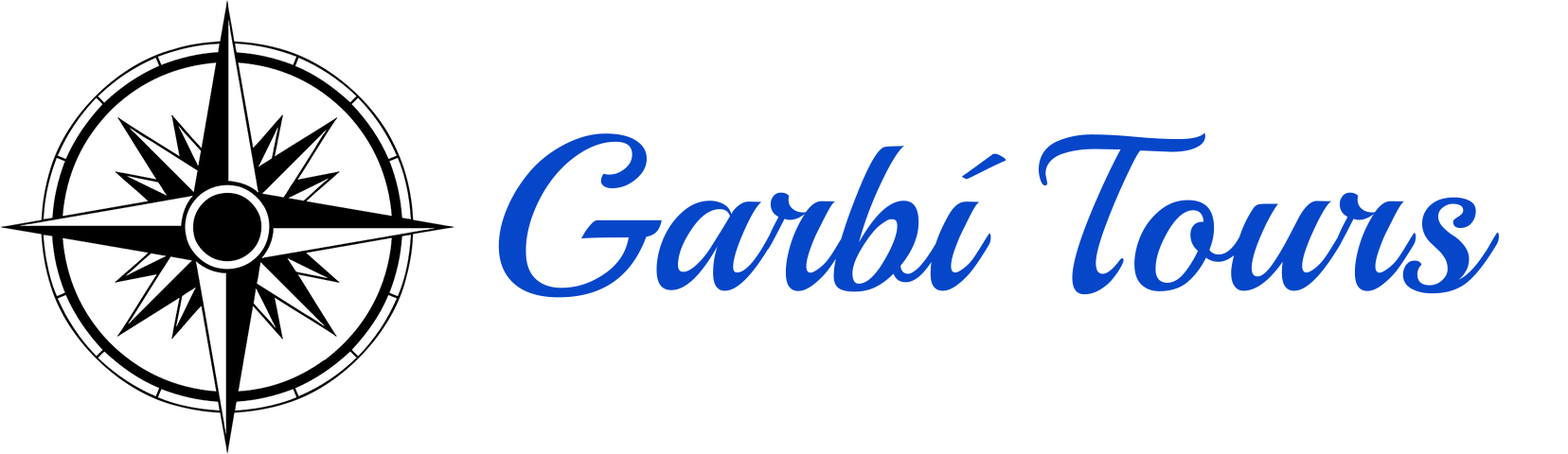
<style>
.page{position:relative;width:1568px;height:454px;background:#ffffff}
.page>*{position:absolute;margin:0}
.t1{font:219.7px "Playball-Regular";color:#0646c9}
</style>
<div class="page">
<p class="t1" style="left:498px;top:133px;width:1001px;height:165px">Garbí Tours</p>
</div>
